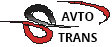
<style>
.page{position:relative;width:112px;height:47px;background:#ffffff}
.page>*{position:absolute;margin:0}
.t1{font:12px/21px "OpenSans-Bold";color:#000000}
</style>
<div class="page">
<p class="t1" style="left:58px;top:12px;width:39px;height:30px;text-align:center">AVTO<br>TRANS</p>
</div>
